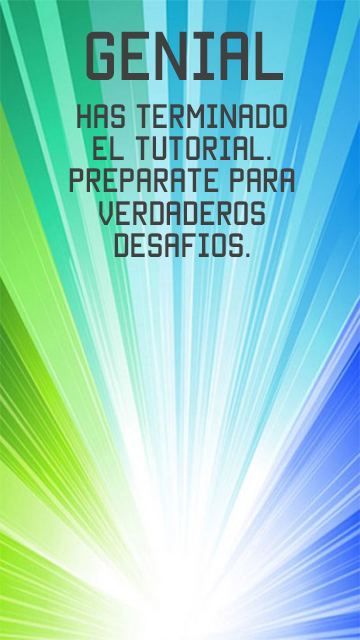
<style>
.page{position:relative;width:360px;height:640px}
.page>*{position:absolute;margin:0}
.t1{font:55px "Manteka";color:#3f4040}
.t2{font:27px "Manteka";color:#3f4040}
</style>
<div class="page">
<p class="t1" style="left:86px;top:31px;width:197px;height:49px">GENIAl</p>
<p class="t2" style="left:69px;top:104px;width:226px;height:153px;text-align:center">has terminado<br>el tutorial.<br>preparate para<br>verdaderos <br>desafios.</p>
</div>
